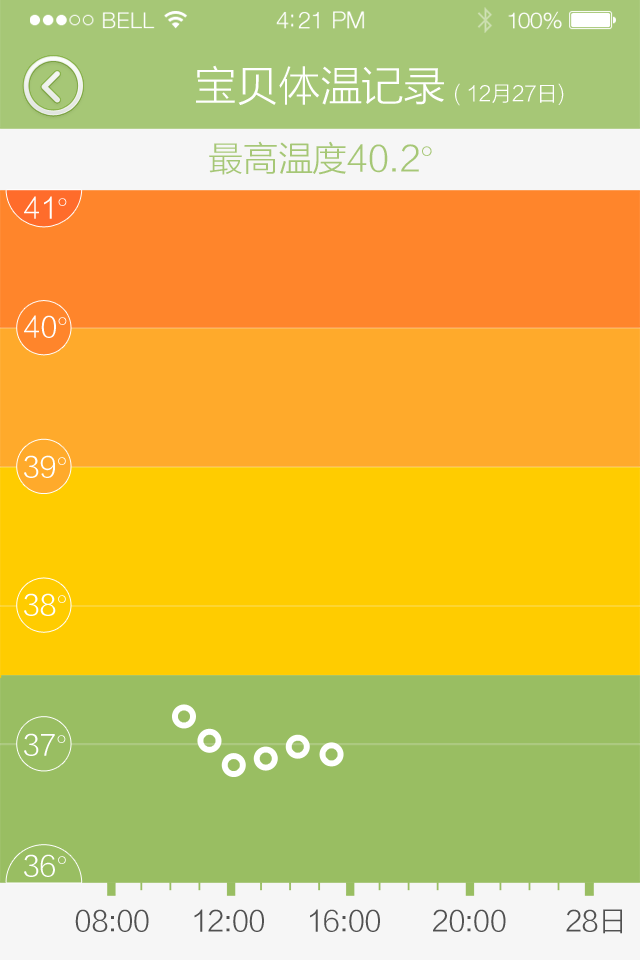
<style>
.page{position:relative;width:640px;height:960px;background:#ffcc00}
.page>*{position:absolute;margin:0}
.t1{font:42.7px "FZLTXHK";letter-spacing:-0.02em;color:#ffffff}
.t2{font:21.3px "FZLTXHK";letter-spacing:-0.02em;color:#ffffff}
.t3{font:35.6px "FZLTXHK";letter-spacing:-0.02em;color:#a6c776}
.t4{font:28.5px "FZLTXHK";letter-spacing:-0.02em;color:#ffffff}
.t5{font:28.5px "FZLTXHK";letter-spacing:-0.02em;color:#515151}
</style>
<div class="page">
<p class="t1" style="left:196px;top:65px;width:248px;height:40px">宝贝体温记录</p>
<p class="t2" style="left:455px;top:83px;width:109px;height:23px">( 12月27日)</p>
<p class="t3" style="left:209px;top:141px;width:223px;height:34px">最高温度40.2°</p>
<p class="t4" style="left:24px;top:196px;width:43px;height:23px">41°</p>
<p class="t4" style="left:24px;top:315px;width:43px;height:23px">40°</p>
<p class="t4" style="left:24px;top:455px;width:42px;height:23px">39°</p>
<p class="t4" style="left:24px;top:593px;width:42px;height:23px">38°</p>
<p class="t4" style="left:24px;top:733px;width:42px;height:23px">37°</p>
<p class="t4" style="left:24px;top:854px;width:42px;height:23px">36°</p>
<p class="t5" style="left:75px;top:909px;width:74px;height:23px">08:00</p>
<p class="t5" style="left:194px;top:909px;width:70px;height:23px">12:00</p>
<p class="t5" style="left:310px;top:909px;width:70px;height:23px">16:00</p>
<p class="t5" style="left:433px;top:909px;width:73px;height:23px">20:00</p>
<p class="t5" style="left:566px;top:909px;width:56px;height:25px">28日</p>
</div>
